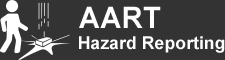
<style>
.page{position:relative;width:225px;height:60px;background:#333333}
.page>*{position:absolute;margin:0}
.t1{font:29.5px "Arial-BoldMT";color:#ffffff}
.t2{font:17.7px "Arial-BoldMT";color:#ffffff}
</style>
<div class="page">
<p class="t1" style="left:79px;top:6px;width:82px;height:22px">AART</p>
<p class="t2" style="left:79px;top:36px;width:146px;height:17px">Hazard Reporting</p>
</div>
